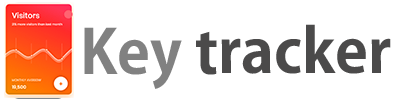
<style>
.page{position:relative;width:400px;height:100px;background:#ffffff}
.page>*{position:absolute;margin:0}
.t1{font:60px "KozGoPr6N-Bold";color:#4b4a4a}
.t2{font:60px "KozGoPr6N-Bold";color:#818181}
</style>
<div class="page">
<p class="t1" style="left:84px;top:24px;width:307px;height:65px"><span class="t2">Key</span> tracker</p>
</div>
